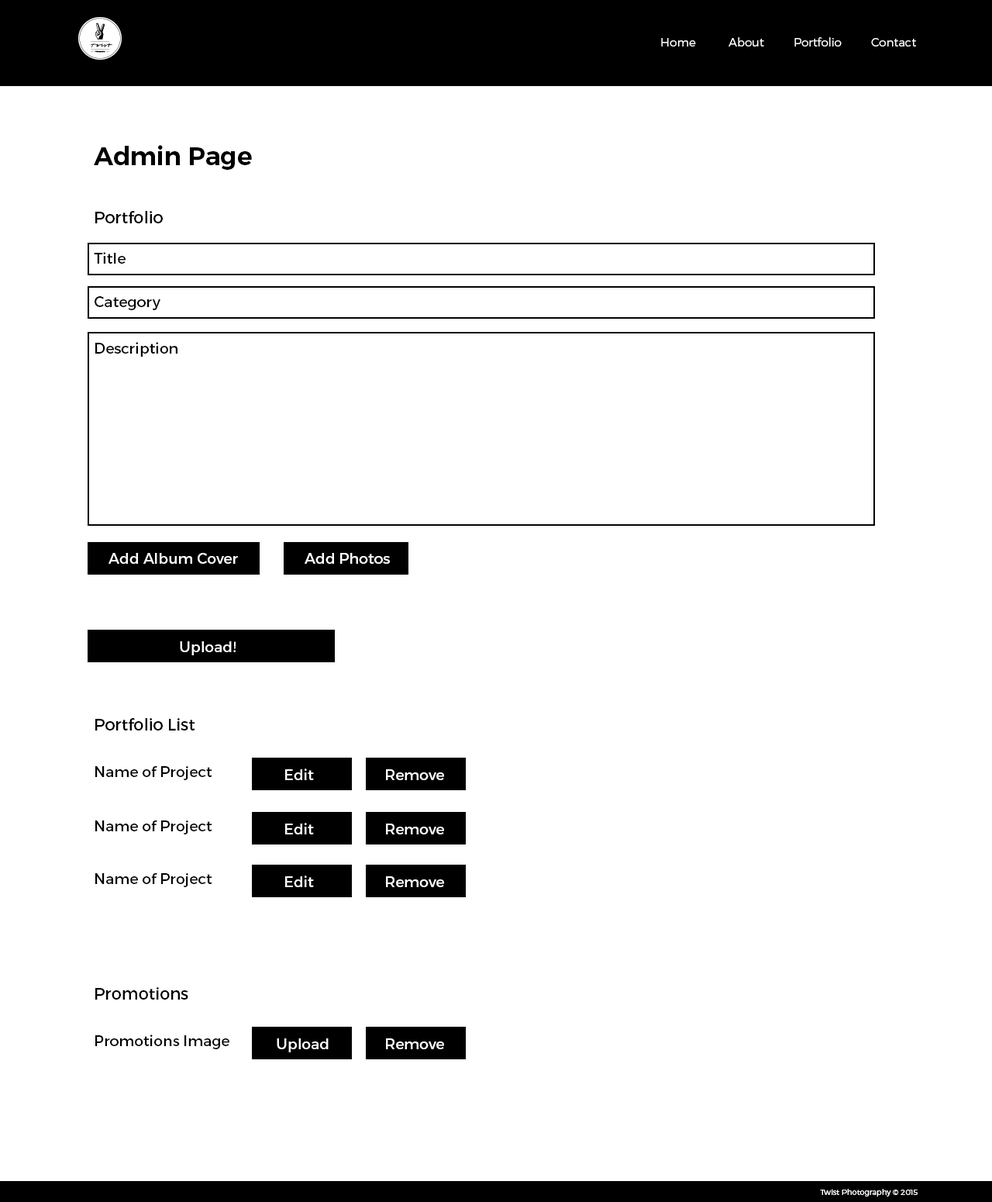
<style>
.page{position:relative;width:992px;height:1202px;background:#ffffff}
.page>*{position:absolute;margin:0}
.t1{font:11.6px "Montserrat-Light";color:#ffffff}
.t2{font:25.6px "Montserrat-SemiBold";color:#000000}
.t3{font:16.3px "Montserrat-Regular";color:#000000}
.t4{font:14.7px "Montserrat-Regular";color:#000000}
.t5{font:14.7px "Montserrat-Regular";color:#ffffff}
.t6{font:7.8px "Montserrat-Light";color:#ffffff}
</style>
<div class="page">
<p class="t1" style="left:661px;top:38px;width:35px;height:9px">Home</p>
<p class="t1" style="left:729px;top:37px;width:35px;height:10px">About</p>
<p class="t1" style="left:795px;top:37px;width:47px;height:10px">Portfolio</p>
<p class="t1" style="left:871px;top:38px;width:45px;height:9px">Contact</p>
<p class="t2" style="left:94px;top:145px;width:158px;height:25px">Admin Page</p>
<p class="t3" style="left:95px;top:211px;width:68px;height:12px">Portfolio</p>
<p class="t4" style="left:94px;top:252px;width:32px;height:12px">Title</p>
<p class="t4" style="left:95px;top:296px;width:65px;height:14px">Category</p>
<p class="t4" style="left:95px;top:342px;width:83px;height:15px">Description</p>
<p class="t5" style="left:109px;top:553px;width:129px;height:11px">Add Album Cover</p>
<p class="t5" style="left:305px;top:553px;width:85px;height:11px">Add Photos</p>
<p class="t5" style="left:180px;top:641px;width:56px;height:14px">Upload!</p>
<p class="t3" style="left:95px;top:718px;width:100px;height:12px">Portfolio List</p>
<p class="t4" style="left:95px;top:766px;width:117px;height:14px">Name of Project</p>
<p class="t5" style="left:285px;top:768px;width:29px;height:12px">Edit</p>
<p class="t5" style="left:386px;top:769px;width:58px;height:11px">Remove</p>
<p class="t4" style="left:95px;top:820px;width:117px;height:14px">Name of Project</p>
<p class="t5" style="left:285px;top:823px;width:29px;height:11px">Edit</p>
<p class="t5" style="left:386px;top:823px;width:58px;height:11px">Remove</p>
<p class="t4" style="left:95px;top:873px;width:117px;height:14px">Name of Project</p>
<p class="t5" style="left:285px;top:875px;width:29px;height:12px">Edit</p>
<p class="t5" style="left:386px;top:876px;width:58px;height:11px">Remove</p>
<p class="t3" style="left:95px;top:987px;width:93px;height:12px">Promotions</p>
<p class="t4" style="left:95px;top:1034px;width:134px;height:15px">Promotions Image</p>
<p class="t5" style="left:277px;top:1038px;width:52px;height:14px">Upload</p>
<p class="t5" style="left:386px;top:1038px;width:58px;height:11px">Remove</p>
<p class="t6" style="left:820px;top:1188px;width:98px;height:8px">Twist Photography © 2015</p>
</div>
